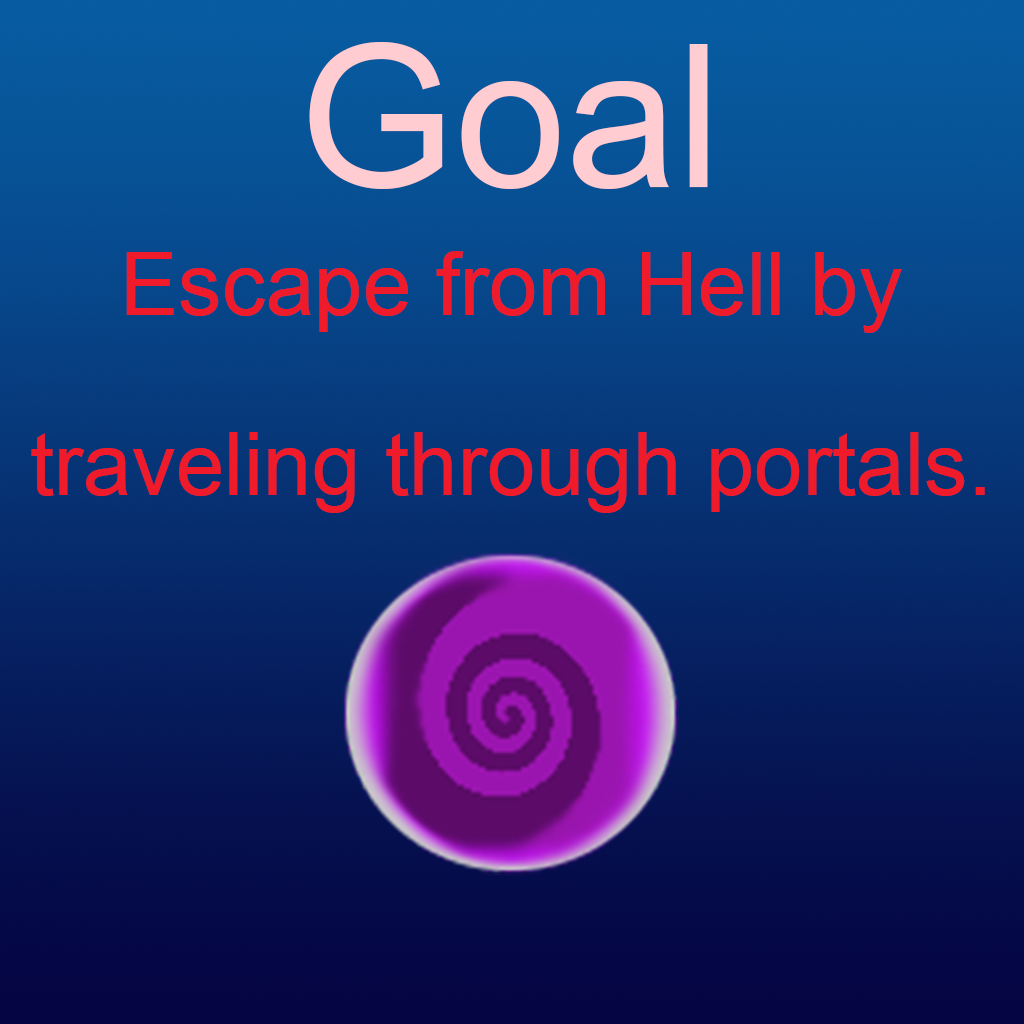
<style>
.page{position:relative;width:1024px;height:1024px}
.page>*{position:absolute;margin:0}
.t1{font:200px "ArialMT";color:#ffcdd1}
.t2{font:150px "ArialMT";color:#f01b2a}
</style>
<div class="page">
<p class="t1" style="left:309px;top:42px;width:399px;height:147px">Goal</p>
<p class="t2" style="left:31px;top:251px;width:954px;height:262px;text-align:center">Escape from Hell by traveling through portals.</p>
</div>
